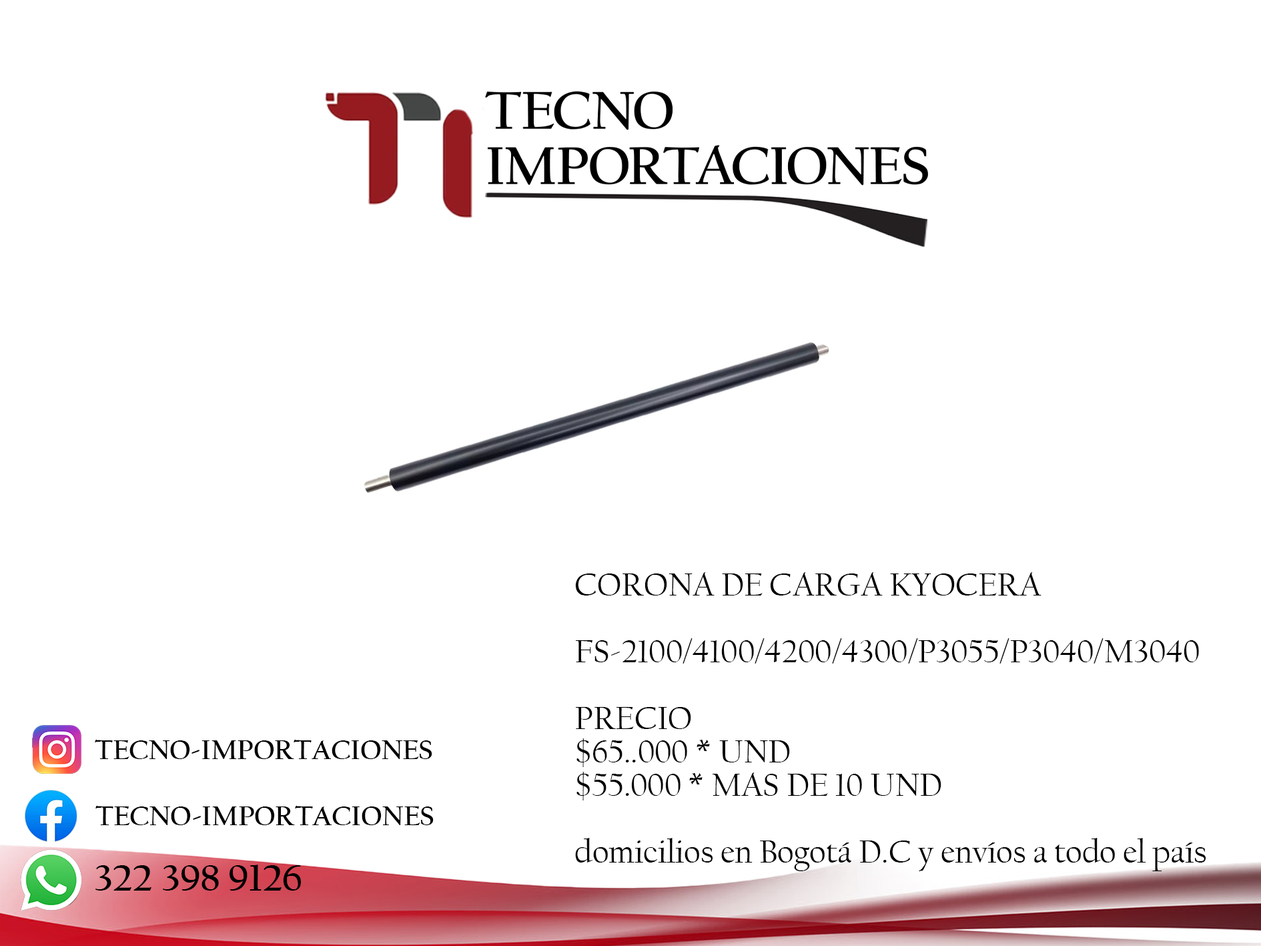
<style>
.page{position:relative;width:1261px;height:946px;background:#ffffff}
.page>*{position:absolute;margin:0}
.t1{font:33.4px/33.4px "CalifornianFB-Reg";letter-spacing:-0.005em;color:#000000}
.t2{font:27.8px "CalifornianFB-Bold";letter-spacing:-0.005em;color:#000000}
.t3{font:38.9px "CalifornianFB-Bold";letter-spacing:-0.005em;color:#000000}
</style>
<div class="page">
<p class="t1" style="left:575px;top:572px;width:631px;height:299px">CORONA DE CARGA KYOCERA<br><br>FS-2100/4100/4200/4300/P3055/P3040/M3040<br><br>PRECIO<br>$65..000 * UND<br>$55.000 * MAS DE 10 UND<br><br>domicilios en Bogotá D.C y envíos a todo el país</p>
<p class="t2" style="left:95px;top:739px;width:337px;height:20px">TECNO-IMPORTACIONES</p>
<p class="t2" style="left:95px;top:805px;width:339px;height:20px">TECNO-IMPORTACIONES</p>
<p class="t3" style="left:95px;top:864px;width:206px;height:26px">322 398 9126</p>
</div>
